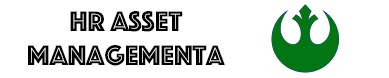
<style>
.page{position:relative;width:389px;height:78px;background:#ffffff}
.page>*{position:absolute;margin:0}
.t1{font:29.2px/33.3px "Phosphate-Inline";color:#000000}
.t2{font:29.2px "Phosphate-Inline";color:#000000}
</style>
<div class="page">
<p class="t1" style="left:28px;top:11px;width:197px;height:55px;text-align:center">HR Asset <br>Managementa<br><span class="t2"><br>fs<br><br><br>Mnagement</span></p>
</div>
